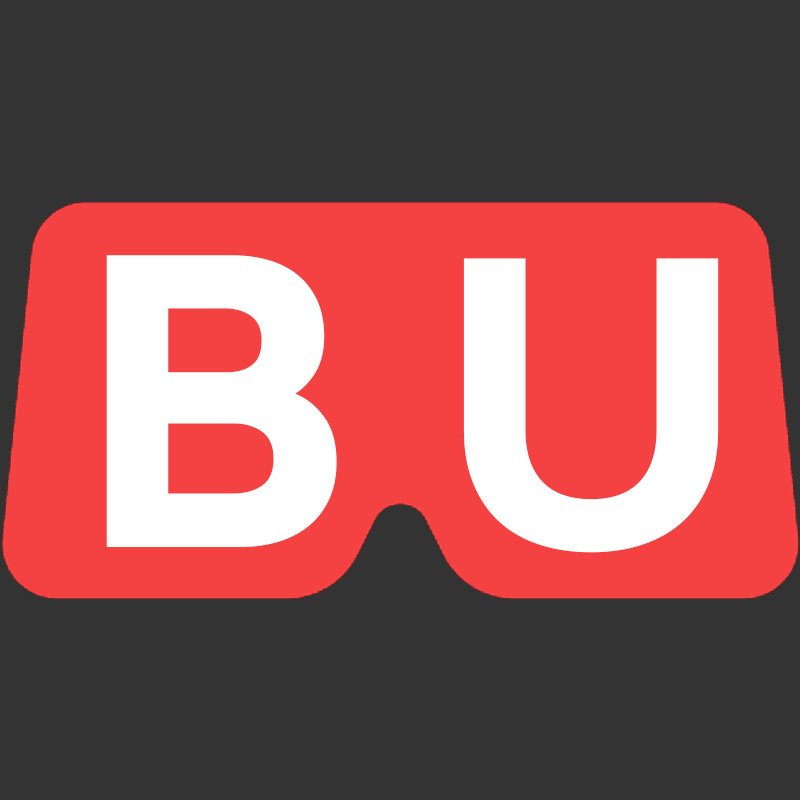
<style>
.page{position:relative;width:800px;height:800px;background:#333333}
.page>*{position:absolute;margin:0}
.t1{font:389.7px "Sailec-Bold";color:#ffffff}
.t2{font:387.3px "Sailec-Bold";color:#ffffff;scale:1.03 1}
</style>
<div class="page">
<p class="t1" style="left:106px;top:255px;width:231px;height:292px">B</p>
<p class="t2" style="left:463px;top:258px;width:256px;height:295px">U</p>
</div>
